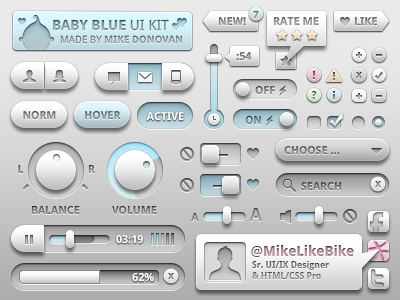
<style>
.page{position:relative;width:400px;height:300px}
.page>*{position:absolute;margin:0}
.t1{font:10.9px "DroidSans-Bold";text-transform:uppercase}
.t2{font:10px "DroidSans-Bold"}
.t3{font:11px "DroidSans-Bold";color:#959595;text-transform:uppercase}
.t4{font:14px "DroidSans-Bold";text-transform:uppercase}
.t5{font:14px "DroidSans";text-transform:uppercase}
.t6{font:10px "DroidSans-Bold";text-transform:uppercase}
.t7{font:10px "DroidSans";text-transform:uppercase}
.t8{font:11px "DroidSans-Bold"}
.t9{font:11px "DroidSans-Bold";color:#8b8b8b;text-transform:uppercase}
.t10{font:11px "DroidSans-Bold";text-transform:uppercase}
.t11{font:11px "DroidSans-Bold";color:#ffffff;text-transform:uppercase}
.t12{font:11.2px "DroidSans-Bold";scale:0.96 1}
.t13{font:18px "DroidSans-Bold"}
.t14{font:11px "DroidSans-Bold";color:#ffffff}
.t15{font:14px "DroidSans-Bold"}
.t16{font:14px "DroidSans"}
.t17{font:9px "DroidSans-Bold"}
</style>
<div class="page">
<p class="t1" style="left:218px;top:17px;width:28px;height:9px">New!</p>
<p class="t2" style="left:253px;top:11px;width:6px;height:7px">7</p>
<p class="t3" style="left:273px;top:16px;width:46px;height:10px">Rate Me</p>
<p class="t1" style="left:354px;top:17px;width:23px;height:9px">Like</p>
<p class="t4" style="left:53px;top:19px;width:116px;height:12px">Baby Blue <span class="t5">UI Kit</span></p>
<p class="t6" style="left:60px;top:35px;width:123px;height:9px"><span class="t7">Made By </span>Mike Donovan</p>
<p class="t8" style="left:236px;top:52px;width:16px;height:9px">:54</p>
<p class="t8" style="left:356px;top:72px;width:6px;height:6px">x</p>
<p class="t8" style="left:255px;top:85px;width:20px;height:10px">OFF</p>
<p class="t8" style="left:311px;top:91px;width:6px;height:8px">?</p>
<p class="t9" style="left:23px;top:110px;width:33px;height:10px">Norm</p>
<p class="t10" style="left:85px;top:110px;width:36px;height:10px">Hover</p>
<p class="t11" style="left:146px;top:111px;width:38px;height:10px">Active</p>
<p class="t12" style="left:245px;top:115px;width:16px;height:10px">ON</p>
<p class="t1" style="left:284px;top:146px;width:56px;height:9px">Choose ...</p>
<p class="t10" style="left:18px;top:165px;width:6px;height:8px">L</p>
<p class="t10" style="left:88px;top:165px;width:7px;height:8px">R</p>
<p class="t1" style="left:301px;top:182px;width:41px;height:9px">Search</p>
<p class="t8" style="left:375px;top:181px;width:6px;height:6px">x</p>
<p class="t10" style="left:31px;top:206px;width:49px;height:8px">Balance</p>
<p class="t10" style="left:112px;top:206px;width:45px;height:8px">Volume</p>
<p class="t13" style="left:250px;top:208px;width:12px;height:13px">A</p>
<p class="t8" style="left:191px;top:212px;width:8px;height:10px">A</p>
<p class="t14" style="left:116px;top:234px;width:28px;height:10px">03:19</p>
<p class="t15" style="left:251px;top:245px;width:103px;height:12px"><span class="t16">@</span>MikeLikeBike</p>
<p class="t17" style="left:252px;top:261px;width:77px;height:18px">Sr. UI/IX Designer<br>&amp; HTML/CSS Pro</p>
<p class="t14" style="left:132px;top:272px;width:22px;height:10px">62%</p>
<p class="t8" style="left:168px;top:273px;width:6px;height:6px">x</p>
</div>
